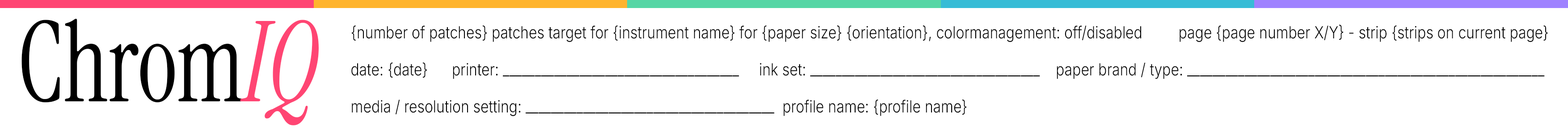
<style>
.page{position:relative;width:1568px;height:137px;background:#ffffff}
.page>*{position:absolute;margin:0}
.t1{font:111.7px "InstrumentSerif-Regular";color:#000000;scale:0.85 1}
.t2{font:111.7px "InstrumentSerif-Italic";color:#ff4573;scale:0.85 1}
.t3{font:16.8px/18.6px "Inter-Light";color:#000000;scale:0.85 1}
</style>
<div class="page">
<p class="t1" style="left:21px;top:19px;width:298px;height:107px">Chrom<span class="t2">IQ</span></p>
<p class="t3" style="left:351px;top:25px;width:1197px;height:91px">{number of patches} patches target for {instrument name} for {paper size} {orientation}, colormanagement: off/disabled         page {page number X/Y} - strip {strips on current page}<br><br>date: {date}      printer: _____________________________________     ink set: ____________________________________    paper brand / type: ________________________________________________________<br><br>media / resolution setting: _______________________________________  profile name: {profile name}</p>
</div>
